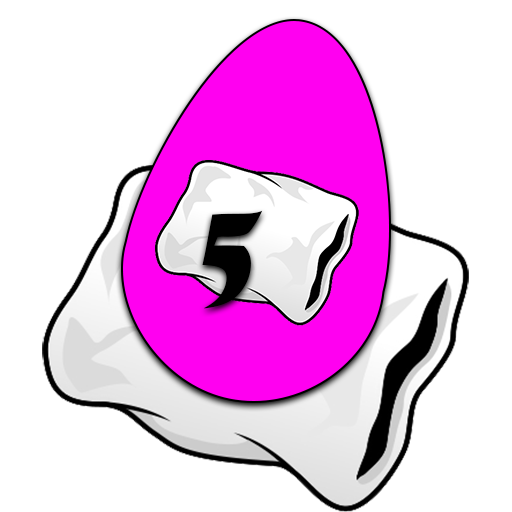
<style>
.page{position:relative;width:512px;height:512px;background:#ffffff}
.page>*{position:absolute;margin:0}
.t1{font:136px "MaturaMTScriptCapitals";color:#000000}
</style>
<div class="page">
<p class="t1" style="left:202px;top:210px;width:61px;height:99px;rotate:-1deg">5</p>
</div>
